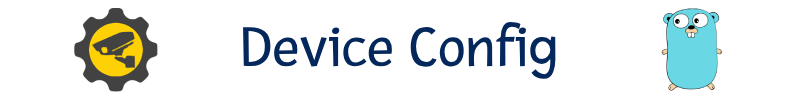
<style>
.page{position:relative;width:800px;height:100px;background:#ffffff}
.page>*{position:absolute;margin:0}
.t1{font:60px "Fresca-Regular";color:#04275c}
</style>
<div class="page">
<p class="t1" style="left:243px;top:21px;width:313px;height:58px">Device Config</p>
</div>
